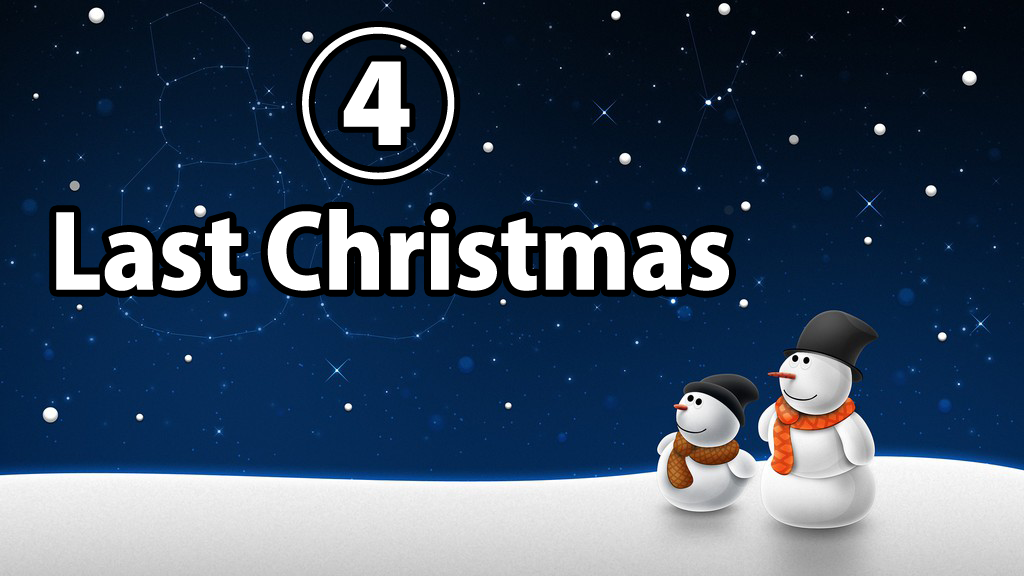
<style>
.page{position:relative;width:1024px;height:576px}
.page>*{position:absolute;margin:0}
.t1{font:160px "KozGoPr6N-Heavy";color:#ffffff}
.t2{font:100px "KozGoPr6N-Heavy";color:#ffffff}
</style>
<div class="page">
<p class="t1" style="left:302px;top:27px;width:153px;height:153px">④</p>
<p class="t2" style="left:56px;top:209px;width:673px;height:82px">Last Christmas</p>
</div>
